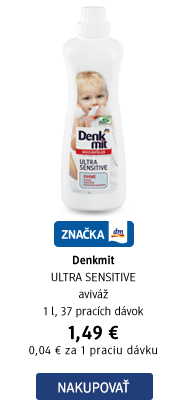
<style>
.page{position:relative;width:188px;height:409px;background:#ffffff}
.page>*{position:absolute;margin:0}
.t1{font:12px/17px "DMBrand-Regular";color:#000000}
.t2{font:12px/17px "DMBrand-Bold";color:#000000}
.t3{font:20px "DMBrand-Bold";letter-spacing:0.04em;color:#000000}
.t4{font:12px/15px "DMBrand-Regular";letter-spacing:0.04em;color:#000000}
.t5{font:14px "DMBrand-Regular";letter-spacing:0.025em;color:#ffffff;text-transform:uppercase}
</style>
<div class="page">
<p class="t1" style="left:29px;top:255px;width:128px;height:102px;text-align:center"><span class="t2">Denkmit <br></span>ULTRA SENSITIVE<br>aviváž<br>1 l, 37 pracích dávok<br><span class="t3">1,49 €<br></span><span class="t4">0,04 € za 1 praciu dávku</span></p>
<p class="t5" style="left:58px;top:379px;width:72px;height:14px">Nakupovať</p>
</div>
